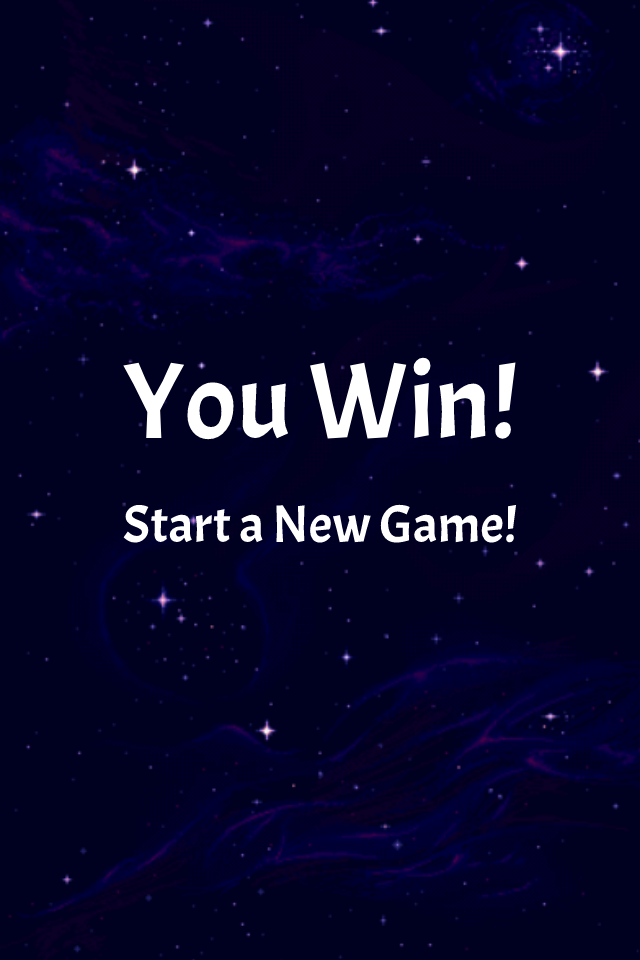
<style>
.page{position:relative;width:640px;height:960px;background:#000020}
.page>*{position:absolute;margin:0}
.t1{font:108px "Acme-Regular";color:#ffffff}
.t2{font:53px "Acme-Regular";color:#ffffff}
</style>
<div class="page">
<p class="t1" style="left:123px;top:357px;width:393px;height:83px">You Win!</p>
<p class="t2" style="left:123px;top:504px;width:394px;height:39px">Start a New Game!</p>
</div>
